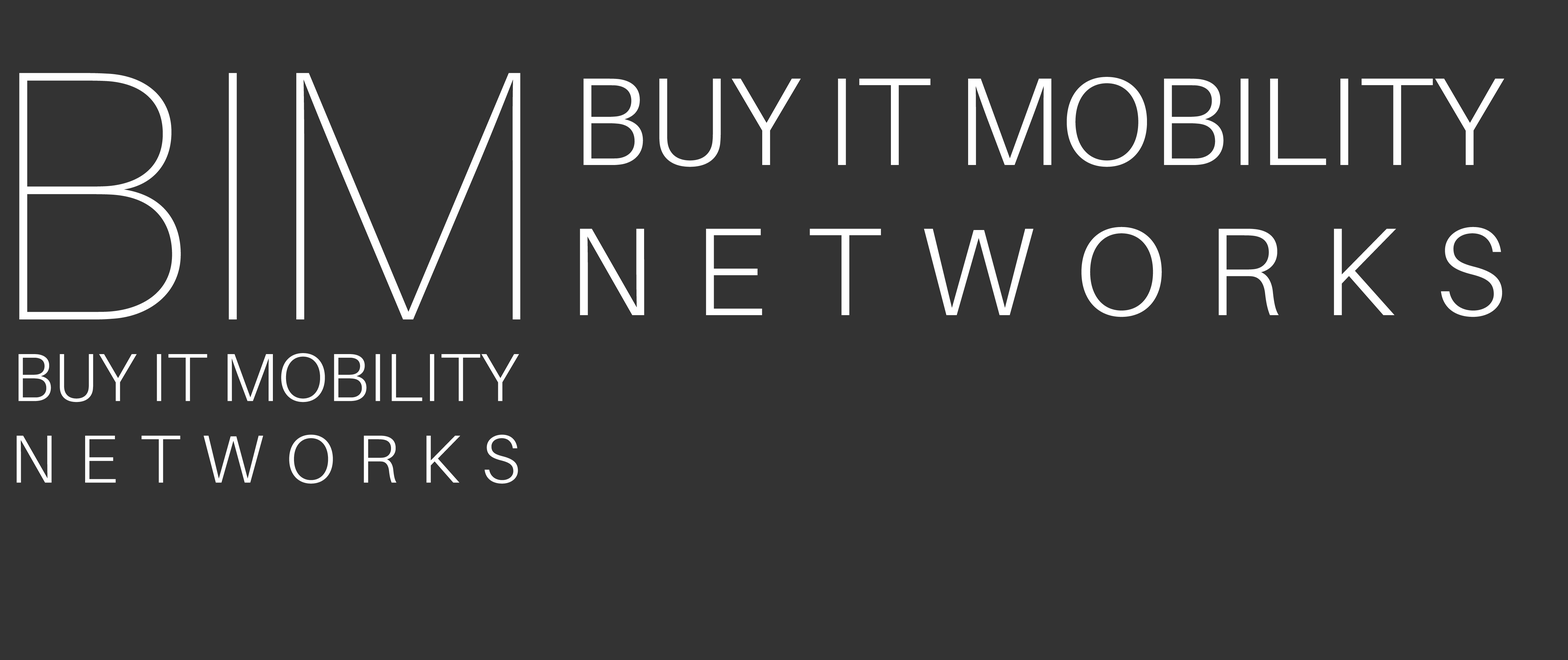
<style>
.page{position:relative;width:1568px;height:660px;background:#333333}
.page>*{position:absolute;margin:0}
.t1{font:68px "Aileron-Light";color:#ffffff}
.t2{font:357px "Aileron-UltraLight";color:#ffffff}
.t3{font:68px "Aileron-Light";letter-spacing:0.32em;color:#ffffff}
.t4{font:125.1px "Aileron-Light";color:#ffffff}
.t5{font:125.1px "Aileron-Light";letter-spacing:0.32em;color:#ffffff}
</style>
<div class="page">
<p class="t1" style="left:16px;top:73px;width:504px;height:411px;text-align:center"><span class="t2">BIM<br></span>BUY IT MOBILITY<br><span class="t3">NETWORKS</span></p>
<p class="t4" style="left:580px;top:77px;width:924px;height:240px;text-align:center">BUY IT MOBILITY<br><span class="t5">NETWORKS</span></p>
</div>
